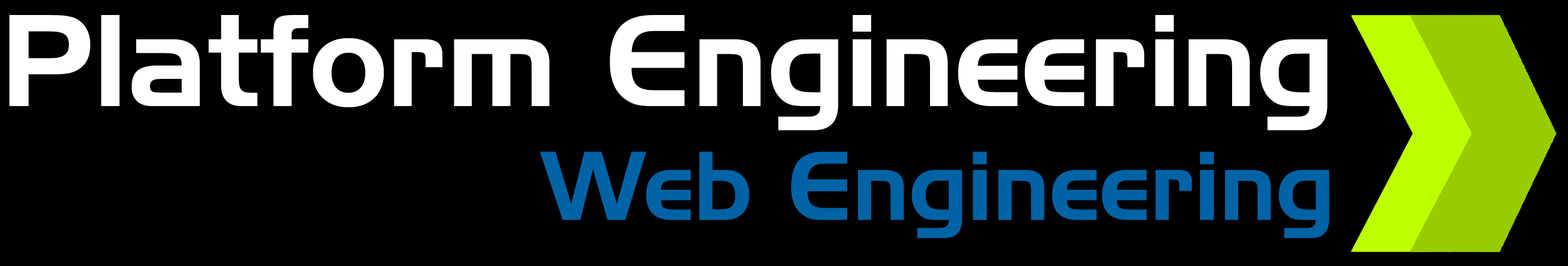
<style>
.page{position:relative;width:1568px;height:266px;background:#000000}
.page>*{position:absolute;margin:0}
.t1{font:126.6px "HandelGothicBT-Regular";color:#ffffff}
.t2{font:94.9px "HandelGothicBT-Regular";color:#0063a5}
</style>
<div class="page">
<p class="t1" style="left:9px;top:15px;width:1320px;height:223px;text-align:right">Platform Engineering<br><span class="t2">Web Engineering</span></p>
</div>
